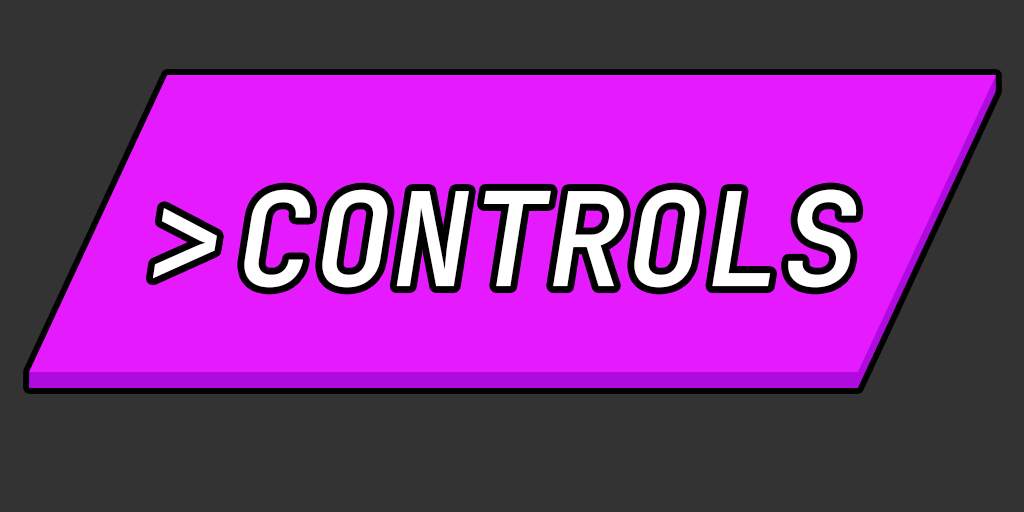
<style>
.page{position:relative;width:1024px;height:512px;background:#333333}
.page>*{position:absolute;margin:0}
.t1{font:130px "JetBrainsMonoItalic-MediumItalic";color:#ffffff}
</style>
<div class="page">
<p class="t1" style="left:152px;top:189px;width:705px;height:99px">CONTROLS</p>
</div>
